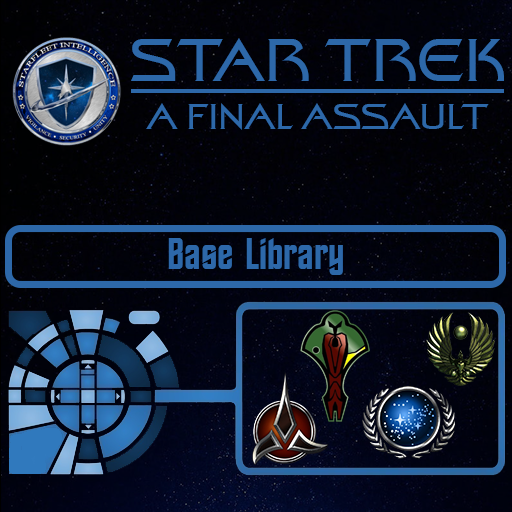
<style>
.page{position:relative;width:512px;height:512px}
.page>*{position:absolute;margin:0}
.t1{font:60px "StarTrekFilmBT-Regular";color:#2d68a9}
.t2{font:36px "StarTrekFilmBT-Regular";color:#2d68a9}
.t3{font:44px "StarTrekBT-Regular";color:#2d68a9}
</style>
<div class="page">
<p class="t1" style="left:131px;top:38px;width:373px;height:43px">STAR TREK</p>
<p class="t2" style="left:146px;top:103px;width:343px;height:27px">A FINAL ASSAULT</p>
<p class="t3" style="left:168px;top:238px;width:175px;height:37px">Base Library</p>
</div>
